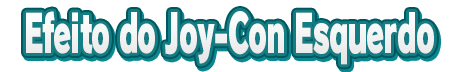
<style>
.page{position:relative;width:460px;height:72px;background:#ffffff}
.page>*{position:absolute;margin:0}
.t1{font:52px "RodinPro-UB";letter-spacing:-0.039em;color:#f3f3f4;scale:0.55 1}
</style>
<div class="page">
<p class="t1" style="left:26px;top:11px;width:408px;height:54px">Efeito do Joy-Con Esquerdo</p>
</div>
